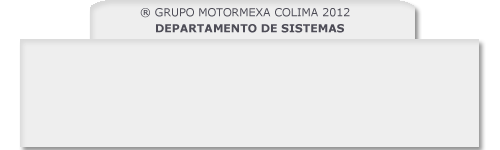
<style>
.page{position:relative;width:500px;height:150px;background:#eeeeee}
.page>*{position:absolute;margin:0}
.t1{font:11px "Verdana";color:#4e4d57}
.t2{font:11px "Verdana-Bold";color:#4e4d57}
</style>
<div class="page">
<p class="t1" style="left:140px;top:8px;width:210px;height:10px">® GRUPO MOTORMEXA COLIMA 2012</p>
<p class="t2" style="left:156px;top:24px;width:188px;height:9px">DEPARTAMENTO DE SISTEMAS</p>
</div>
